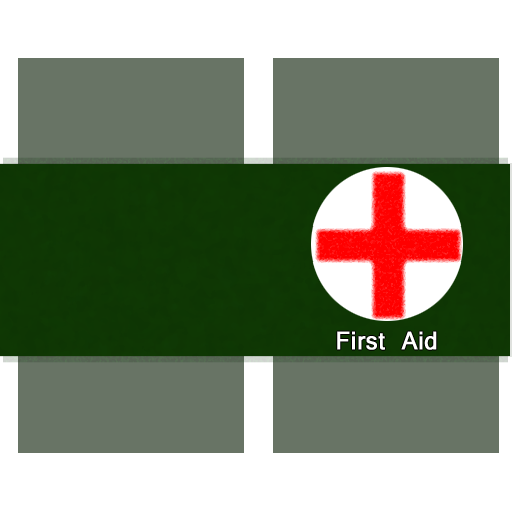
<style>
.page{position:relative;width:512px;height:512px;background:#687465}
.page>*{position:absolute;margin:0}
.t1{font:27.3px "Vrinda";letter-spacing:0.005em;color:#ffffff;font-weight:bold;scale:0.95 1}
</style>
<div class="page">
<p class="t1" style="left:337px;top:331px;width:100px;height:19px">First Aid</p>
</div>
